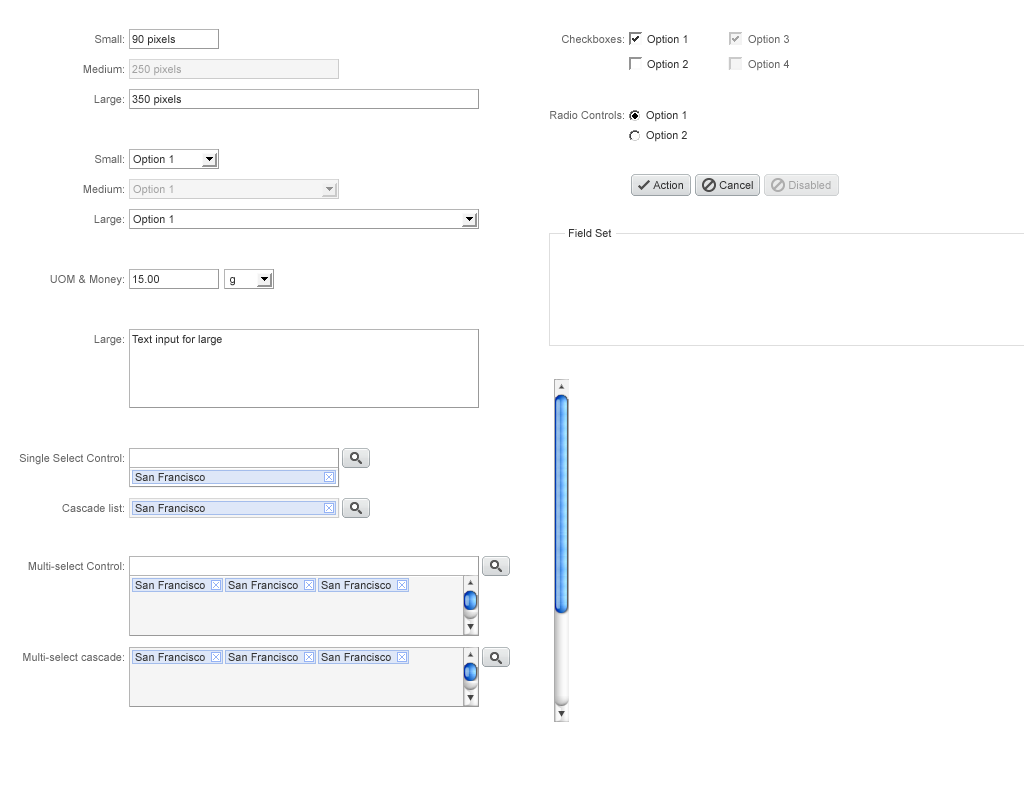
<style>
.page{position:relative;width:1024px;height:800px;background:#ffffff}
.page>*{position:absolute;margin:0}
.t1{font:11px "ArialMT";color:#666666}
.t2{font:11px "ArialMT";color:#333333}
.t3{font:11px "ArialMT";color:#a3a3a3}
</style>
<div class="page">
<p class="t1" style="left:95px;top:35px;width:29px;height:8px">Small:</p>
<p class="t2" style="left:132px;top:35px;width:43px;height:11px">90 pixels</p>
<p class="t1" style="left:562px;top:35px;width:62px;height:8px">Checkboxes:</p>
<p class="t2" style="left:647px;top:35px;width:40px;height:11px">Option 1</p>
<p class="t1" style="left:748px;top:35px;width:41px;height:11px">Option 3</p>
<p class="t1" style="left:83px;top:65px;width:41px;height:8px">Medium:</p>
<p class="t3" style="left:132px;top:65px;width:49px;height:11px">250 pixels</p>
<p class="t2" style="left:647px;top:60px;width:41px;height:11px">Option 2</p>
<p class="t1" style="left:748px;top:60px;width:41px;height:11px">Option 4</p>
<p class="t1" style="left:94px;top:95px;width:30px;height:11px">Large:</p>
<p class="t2" style="left:132px;top:95px;width:49px;height:11px">350 pixels</p>
<p class="t1" style="left:550px;top:111px;width:74px;height:8px">Radio Controls:</p>
<p class="t2" style="left:646px;top:111px;width:40px;height:11px">Option 1</p>
<p class="t2" style="left:646px;top:131px;width:41px;height:11px">Option 2</p>
<p class="t1" style="left:95px;top:155px;width:29px;height:8px">Small:</p>
<p class="t2" style="left:133px;top:155px;width:40px;height:11px">Option 1</p>
<p class="t1" style="left:83px;top:185px;width:41px;height:8px">Medium:</p>
<p class="t3" style="left:133px;top:185px;width:40px;height:11px">Option 1</p>
<p class="t2" style="left:653px;top:181px;width:30px;height:8px">Action</p>
<p class="t2" style="left:719px;top:181px;width:34px;height:8px">Cancel</p>
<p class="t3" style="left:789px;top:181px;width:42px;height:8px">Disabled</p>
<p class="t1" style="left:94px;top:215px;width:30px;height:11px">Large:</p>
<p class="t2" style="left:133px;top:215px;width:40px;height:11px">Option 1</p>
<p class="t2" style="left:569px;top:229px;width:43px;height:8px">Field Set</p>
<p class="t1" style="left:50px;top:275px;width:74px;height:11px">UOM &amp; Money:</p>
<p class="t2" style="left:133px;top:275px;width:26px;height:8px">15.00</p>
<p class="t2" style="left:230px;top:277px;width:5px;height:9px">g</p>
<p class="t1" style="left:94px;top:335px;width:30px;height:11px">Large:</p>
<p class="t2" style="left:132px;top:335px;width:90px;height:11px">Text input for large</p>
<p class="t1" style="left:19px;top:454px;width:105px;height:11px">Single Select Control:</p>
<p class="t2" style="left:135px;top:473px;width:70px;height:8px">San Francisco</p>
<p class="t1" style="left:62px;top:504px;width:62px;height:8px">Cascade list:</p>
<p class="t2" style="left:135px;top:504px;width:70px;height:8px">San Francisco</p>
<p class="t1" style="left:28px;top:562px;width:96px;height:8px">Multi-select Control:</p>
<p class="t2" style="left:135px;top:581px;width:70px;height:8px">San Francisco</p>
<p class="t2" style="left:228px;top:581px;width:70px;height:8px">San Francisco</p>
<p class="t2" style="left:321px;top:581px;width:70px;height:8px">San Francisco</p>
<p class="t1" style="left:23px;top:653px;width:101px;height:8px">Multi-select cascade:</p>
<p class="t2" style="left:135px;top:653px;width:70px;height:8px">San Francisco</p>
<p class="t2" style="left:228px;top:653px;width:70px;height:8px">San Francisco</p>
<p class="t2" style="left:321px;top:653px;width:70px;height:8px">San Francisco</p>
</div>
